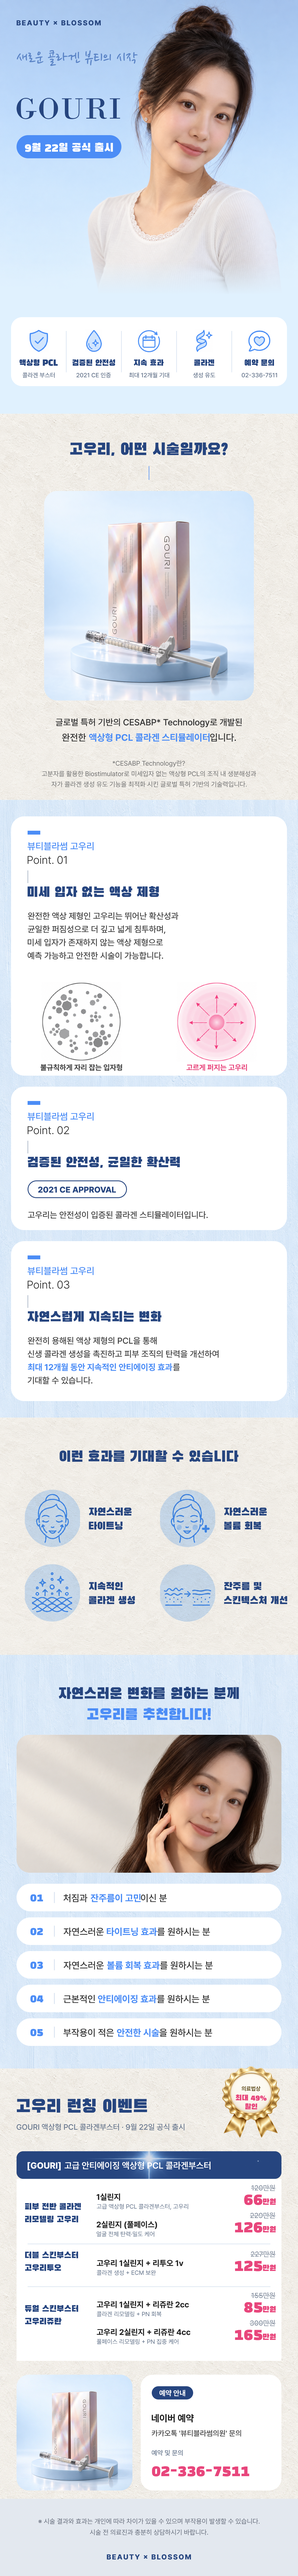
<style>
.page{position:relative;width:298px;height:2576px;background:#ffffff}
.page>*{position:absolute;margin:0}
.t1{font:7.2px "Pretendard-ExtraBold";letter-spacing:0.12em;color:#26457f}
.t2{font:17.1px "NanumPen-Regular";color:#5b84c6}
.t3{font:30.9px "BodoniMT";letter-spacing:0.02em;color:#26457f}
.t4{font:11.6px "BlackHanSans-Regular";color:#ffffff}
.t5{font:8.3px "BlackHanSans-Regular";color:#26457f}
.t6{font:6.1px "Pretendard-Medium";color:#6b7a90}
.t7{font:6.1px "Pretendard-Medium"}
.t8{font:16.5px "BlackHanSans-Regular";color:#26457f}
.t9{font:8.8px "Pretendard-Medium";color:#333333}
.t10{font:9.4px "Pretendard-Medium";color:#333333}
.t11{font:9.4px "Pretendard-Bold";color:#4c8df6}
.t12{font:6.6px "Pretendard-Regular";color:#777777}
.t13{font:9.4px "Pretendard-Medium";color:#4c8df6}
.t14{font:11px "Pretendard-Light";color:#333333}
.t15{font:13.8px "BlackHanSans-Regular";color:#26457f}
.t16{font:8.5px "Pretendard-Medium";color:#444444}
.t17{font:7.4px "Pretendard-Bold";color:#444444}
.t18{font:7.4px "Pretendard-Bold";color:#e8467c}
.t19{font:8.3px "Pretendard-ExtraBold";color:#26457f}
.t20{font:8.5px "Pretendard-Bold";color:#4c8df6}
.t21{font:14.9px "BlackHanSans-Regular";color:#26457f}
.t22{font:10.5px "BlackHanSans-Regular";color:#26457f}
.t23{font:15.4px "BlackHanSans-Regular";color:#26457f}
.t24{font:15.4px "BlackHanSans-Regular";color:#4c8df6}
.t25{font:11px "BlackHanSans-Regular";color:#4c8df6}
.t26{font:5.5px "Pretendard-Bold";color:#6b5a2e}
.t27{font:18.2px "BlackHanSans-Regular";color:#26457f}
.t28{font:7.7px "BlackHanSans-Regular";color:#e8467c}
.t29{font:7.7px "Pretendard-Medium";color:#6b7a90}
.t30{font:8.8px "Pretendard-ExtraBold";color:#ffffff}
.t31{font:8.8px "Pretendard-SemiBold";color:#ffffff}
.t32{font:7.2px "Pretendard-Medium";color:#8a94a3}
.t33{font:8px "Pretendard-Bold";color:#222222}
.t34{font:16px "BlackHanSans-Regular";color:#e8467c}
.t35{font:8.3px "BlackHanSans-Regular";color:#e8467c}
.t36{font:8.8px "BlackHanSans-Regular";color:#26457f}
.t37{font:6.1px "Pretendard-Regular";color:#6b7a90}
.t38{font:7.2px "Pretendard-Bold";color:#ffffff}
.t39{font:9.4px "Pretendard-Bold";color:#222222}
.t40{font:7.4px "Pretendard-Medium";color:#444444}
.t41{font:6.6px "Pretendard-Medium";color:#6b7a90}
.t42{font:15.4px "BlackHanSans-Regular";color:#e8467c}
.t43{font:6.6px "Pretendard-Regular"}
.t44{font:6.6px "Pretendard-Regular";color:#6b7280}
</style>
<div class="page">
<p class="t1" style="left:17px;top:20px;width:84px;height:6px">BEAUTY × BLOSSOM</p>
<p class="t2" style="left:17px;top:50px;width:121px;height:16px">새로운 콜라겐 뷰티의 시작</p>
<p class="t3" style="left:17px;top:98px;width:103px;height:21px">GOURI</p>
<p class="t4" style="left:25px;top:142px;width:88px;height:10px">9월 22일 공식 출시</p>
<p class="t5" style="left:19px;top:359px;width:39px;height:7px">액상형 PCL</p>
<p class="t5" style="left:72px;top:359px;width:43px;height:7px">검증된 안전성</p>
<p class="t5" style="left:134px;top:359px;width:30px;height:7px">지속 효과</p>
<p class="t5" style="left:194px;top:359px;width:20px;height:7px">콜라겐</p>
<p class="t5" style="left:244px;top:359px;width:30px;height:7px">예약 문의</p>
<p class="t6" style="left:22px;top:372px;width:33px;height:6px">콜라겐 부스터</p>
<p class="t6" style="left:76px;top:372px;width:35px;height:6px">2021 CE 인증</p>
<p class="t7" style="left:129px;top:372px;width:40px;height:6px">최대 12개월 기대</p>
<p class="t6" style="left:193px;top:372px;width:22px;height:6px">생성 유도</p>
<p class="t6" style="left:241px;top:373px;width:36px;height:5px">02-336-7511</p>
<p class="t8" style="left:70px;top:442px;width:158px;height:14px">고우리, 어떤 시술일까요?</p>
<p class="t9" style="left:56px;top:718px;width:186px;height:9px">글로벌 특허 기반의 CESABP* Technology로 개발된</p>
<p class="t10" style="left:62px;top:733px;width:24px;height:9px">완전한</p>
<p class="t11" style="left:89px;top:733px;width:120px;height:9px">액상형 PCL 콜라겐 스티뮬레이터</p>
<p class="t10" style="left:210px;top:733px;width:26px;height:9px">입니다.</p>
<p class="t12" style="left:113px;top:760px;width:72px;height:7px">*CESABP Technology란?</p>
<p class="t12" style="left:41px;top:771px;width:215px;height:6px">고분자를 활용한 Biostimulator로 미세입자 없는 액상형 PCL의 조직 내 생분해성과</p>
<p class="t12" style="left:51px;top:781px;width:195px;height:6px">자가 콜라겐 생성 유도 기능을 최적화 시킨 글로벌 특허 기반의 기술력입니다.</p>
<p class="t13" style="left:28px;top:842px;width:65px;height:8px">뷰티블라썸 고우리</p>
<p class="t14" style="left:28px;top:856px;width:39px;height:8px">Point. 01</p>
<p class="t15" style="left:28px;top:886px;width:131px;height:11px">미세 입자 없는 액상 제형</p>
<p class="t16" style="left:28px;top:912px;width:150px;height:8px">완전한 액상 제형인 고우리는 뛰어난 확산성과</p>
<p class="t16" style="left:28px;top:925px;width:137px;height:9px">균일한 퍼짐성으로 더 깊고 넓게 침투하며,</p>
<p class="t16" style="left:28px;top:939px;width:135px;height:7px">미세 입자가 존재하지 않는 액상 제형으로</p>
<p class="t16" style="left:28px;top:952px;width:135px;height:8px">예측 가능하고 안전한 시술이 가능합니다.</p>
<p class="t17" style="left:40px;top:1064px;width:82px;height:7px">불규칙하게 자리 잡는 입자형</p>
<p class="t18" style="left:186px;top:1064px;width:61px;height:7px">고르게 퍼지는 고우리</p>
<p class="t13" style="left:28px;top:1112px;width:65px;height:9px">뷰티블라썸 고우리</p>
<p class="t14" style="left:28px;top:1126px;width:41px;height:8px">Point. 02</p>
<p class="t15" style="left:28px;top:1156px;width:152px;height:12px">검증된 안전성, 균일한 확산력</p>
<p class="t19" style="left:38px;top:1187px;width:78px;height:6px">2021 CE APPROVAL</p>
<p class="t16" style="left:28px;top:1211px;width:180px;height:8px">고우리는 안전성이 입증된 콜라겐 스티뮬레이터입니다.</p>
<p class="t13" style="left:28px;top:1267px;width:65px;height:8px">뷰티블라썸 고우리</p>
<p class="t14" style="left:28px;top:1281px;width:42px;height:8px">Point. 03</p>
<p class="t15" style="left:28px;top:1311px;width:134px;height:11px">자연스럽게 지속되는 변화</p>
<p class="t16" style="left:28px;top:1337px;width:129px;height:8px">완전히 용해된 액상 제형의 PCL을 통해</p>
<p class="t16" style="left:28px;top:1350px;width:190px;height:8px">신생 콜라겐 생성을 촉진하고 피부 조직의 탄력을 개선하여</p>
<p class="t20" style="left:28px;top:1363px;width:144px;height:8px">최대 12개월 동안 지속적인 안티에이징 효과</p>
<p class="t16" style="left:173px;top:1364px;width:7px;height:7px">를</p>
<p class="t16" style="left:28px;top:1377px;width:64px;height:7px">기대할 수 있습니다.</p>
<p class="t21" style="left:59px;top:1450px;width:179px;height:12px">이런 효과를 기대할 수 있습니다</p>
<p class="t22" style="left:89px;top:1508px;width:43px;height:8px">자연스러운</p>
<p class="t22" style="left:224px;top:1508px;width:43px;height:8px">자연스러운</p>
<p class="t22" style="left:89px;top:1522px;width:33px;height:8px">타이트닝</p>
<p class="t22" style="left:224px;top:1521px;width:37px;height:9px">볼륨 회복</p>
<p class="t22" style="left:89px;top:1582px;width:33px;height:8px">지속적인</p>
<p class="t22" style="left:224px;top:1582px;width:37px;height:8px">잔주름 및</p>
<p class="t22" style="left:89px;top:1596px;width:46px;height:8px">콜라겐 생성</p>
<p class="t22" style="left:224px;top:1596px;width:63px;height:8px">스킨텍스처 개선</p>
<p class="t23" style="left:59px;top:1687px;width:180px;height:12px">자연스러운 변화를 원하는 분께</p>
<p class="t24" style="left:87px;top:1707px;width:123px;height:13px">고우리를 추천합니다!</p>
<p class="t25" style="left:30px;top:1894px;width:13px;height:8px">01</p>
<p class="t10" style="left:63px;top:1894px;width:24px;height:8px">처짐과</p>
<p class="t11" style="left:90px;top:1894px;width:51px;height:8px">잔주름이 고민</p>
<p class="t10" style="left:141px;top:1894px;width:26px;height:8px">이신 분</p>
<p class="t25" style="left:30px;top:1928px;width:13px;height:7px">02</p>
<p class="t10" style="left:63px;top:1928px;width:41px;height:8px">자연스러운</p>
<p class="t11" style="left:107px;top:1927px;width:50px;height:9px">타이트닝 효과</p>
<p class="t10" style="left:157px;top:1928px;width:53px;height:8px">를 원하시는 분</p>
<p class="t25" style="left:30px;top:1962px;width:13px;height:7px">03</p>
<p class="t10" style="left:63px;top:1961px;width:41px;height:9px">자연스러운</p>
<p class="t11" style="left:107px;top:1961px;width:53px;height:9px">볼륨 회복 효과</p>
<p class="t10" style="left:160px;top:1961px;width:53px;height:9px">를 원하시는 분</p>
<p class="t25" style="left:30px;top:1995px;width:13px;height:8px">04</p>
<p class="t10" style="left:63px;top:1995px;width:32px;height:8px">근본적인</p>
<p class="t11" style="left:98px;top:1995px;width:59px;height:8px">안티에이징 효과</p>
<p class="t10" style="left:157px;top:1995px;width:53px;height:8px">를 원하시는 분</p>
<p class="t25" style="left:30px;top:2029px;width:13px;height:7px">05</p>
<p class="t10" style="left:63px;top:2029px;width:51px;height:8px">부작용이 적은</p>
<p class="t11" style="left:117px;top:2028px;width:42px;height:9px">안전한 시술</p>
<p class="t10" style="left:159px;top:2029px;width:53px;height:8px">을 원하시는 분</p>
<p class="t26" style="left:241px;top:2086px;width:19px;height:5px">의료법상</p>
<p class="t27" style="left:17px;top:2098px;width:130px;height:15px">고우리 런칭 이벤트</p>
<p class="t28" style="left:235px;top:2094px;width:31px;height:7px">최대 49%</p>
<p class="t28" style="left:245px;top:2103px;width:12px;height:6px">할인</p>
<p class="t29" style="left:17px;top:2123px;width:168px;height:8px">GOURI 액상형 PCL 콜라겐부스터 · 9월 22일 공식 출시</p>
<p class="t30" style="left:28px;top:2162px;width:33px;height:9px">[GOURI]</p>
<p class="t31" style="left:65px;top:2161px;width:145px;height:8px">고급 안티에이징 액상형 PCL 콜라겐부스터</p>
<p class="t32" style="left:251px;top:2185px;width:25px;height:6px">120만원</p>
<p class="t33" style="left:97px;top:2193px;width:23px;height:8px">1실린지</p>
<p class="t34" style="left:244px;top:2194px;width:18px;height:11px">66</p>
<p class="t35" style="left:263px;top:2198px;width:13px;height:7px">만원</p>
<p class="t36" style="left:25px;top:2203px;width:56px;height:7px">피부 전반 콜라겐</p>
<p class="t37" style="left:97px;top:2204px;width:91px;height:6px">고급 액상형 PCL 콜라겐부스터, 고우리</p>
<p class="t32" style="left:250px;top:2212px;width:25px;height:7px">229만원</p>
<p class="t36" style="left:25px;top:2216px;width:53px;height:6px">리모델링 고우리</p>
<p class="t33" style="left:97px;top:2221px;width:60px;height:8px">2실린지 (풀페이스)</p>
<p class="t34" style="left:235px;top:2222px;width:27px;height:11px">126</p>
<p class="t37" style="left:97px;top:2231px;width:57px;height:6px">얼굴 전체 탄력·밀도 케어</p>
<p class="t35" style="left:263px;top:2226px;width:13px;height:6px">만원</p>
<p class="t36" style="left:25px;top:2251px;width:53px;height:7px">더블 스킨부스터</p>
<p class="t33" style="left:97px;top:2259px;width:86px;height:8px">고우리 1실린지 + 리투오 1v</p>
<p class="t34" style="left:235px;top:2260px;width:27px;height:11px">125</p>
<p class="t32" style="left:250px;top:2251px;width:26px;height:6px">227만원</p>
<p class="t36" style="left:25px;top:2264px;width:36px;height:7px">고우리투오</p>
<p class="t37" style="left:97px;top:2270px;width:59px;height:5px">콜라겐 생성 + ECM 보완</p>
<p class="t35" style="left:263px;top:2265px;width:13px;height:6px">만원</p>
<p class="t32" style="left:251px;top:2292px;width:25px;height:7px">155만원</p>
<p class="t36" style="left:25px;top:2305px;width:53px;height:7px">듀얼 스킨부스터</p>
<p class="t33" style="left:97px;top:2301px;width:92px;height:7px">고우리 1실린지 + 리쥬란 2cc</p>
<p class="t34" style="left:244px;top:2302px;width:18px;height:11px">85</p>
<p class="t35" style="left:263px;top:2306px;width:13px;height:6px">만원</p>
<p class="t36" style="left:25px;top:2318px;width:37px;height:6px">고우리쥬란</p>
<p class="t37" style="left:97px;top:2311px;width:65px;height:6px">콜라겐 리모델링 + PN 회복</p>
<p class="t32" style="left:250px;top:2320px;width:26px;height:6px">300만원</p>
<p class="t33" style="left:97px;top:2328px;width:93px;height:8px">고우리 2실린지 + 리쥬란 4cc</p>
<p class="t34" style="left:235px;top:2329px;width:27px;height:11px">165</p>
<p class="t35" style="left:263px;top:2334px;width:13px;height:6px">만원</p>
<p class="t37" style="left:97px;top:2339px;width:81px;height:5px">풀페이스 리모델링 + PN 집중 케어</p>
<p class="t38" style="left:159px;top:2390px;width:26px;height:6px">예약 안내</p>
<p class="t39" style="left:152px;top:2414px;width:42px;height:9px">네이버 예약</p>
<p class="t40" style="left:152px;top:2430px;width:89px;height:7px">카카오톡 '뷰티블라썸의원' 문의</p>
<p class="t41" style="left:152px;top:2450px;width:31px;height:6px">예약 및 문의</p>
<p class="t42" style="left:152px;top:2466px;width:97px;height:10px">02-336-7511</p>
<p class="t43" style="left:38px;top:2518px;width:221px;height:6px">※ 시술 결과와 효과는 개인에 따라 차이가 있을 수 있으며 부작용이 발생할 수 있습니다.</p>
<p class="t44" style="left:90px;top:2529px;width:118px;height:6px">시술 전 의료진과 충분히 상담하시기 바랍니다.</p>
<p class="t1" style="left:107px;top:2554px;width:84px;height:6px">BEAUTY × BLOSSOM</p>
</div>
